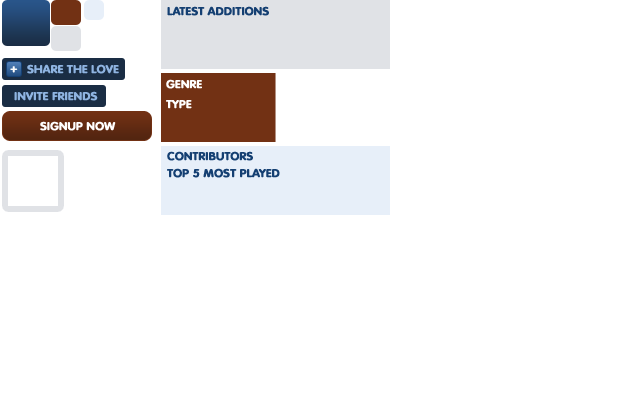
<style>
.page{position:relative;width:635px;height:400px;background:#ffffff}
.page>*{position:absolute;margin:0}
.t1{font:11.4px "VAGRoundedStd-Bold";color:#143f72;font-weight:bold;scale:1.05 1}
.t2{font:11.4px "VAGRoundedStd-Bold";color:#8fb4e1;font-weight:bold;scale:1.05 1}
.t3{font:11.4px "VAGRoundedStd-Bold";color:#fefefe;font-weight:bold;scale:1.05 1}
.t4{font:11.4px "VAGRoundedStd-Bold";color:#ffffff;font-weight:bold;scale:1.05 1}
</style>
<div class="page">
<p class="t1" style="left:167px;top:6px;width:102px;height:10px">LATEST ADDITIONS</p>
<p class="t2" style="left:27px;top:64px;width:92px;height:10px">SHARE THE LOVE</p>
<p class="t3" style="left:10px;top:66px;width:8px;height:7px">+</p>
<p class="t4" style="left:166px;top:79px;width:36px;height:10px">GENRE</p>
<p class="t2" style="left:14px;top:91px;width:84px;height:10px">INVITE FRIENDS</p>
<p class="t4" style="left:166px;top:100px;width:26px;height:9px">TYPE</p>
<p class="t4" style="left:40px;top:121px;width:76px;height:10px">SIGNUP NOW</p>
<p class="t1" style="left:167px;top:151px;width:86px;height:10px">CONTRIBUTORS</p>
<p class="t1" style="left:167px;top:168px;width:113px;height:10px">TOP 5 MOST PLAYED</p>
</div>
